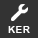
<style>
.page{position:relative;width:38px;height:38px;background:#333333}
.page>*{position:absolute;margin:0}
.t1{font:10px "Arial-BoldMT";letter-spacing:0.05em;color:#ffffff}
</style>
<div class="page">
<p class="t1" style="left:8px;top:26px;width:22px;height:7px">KER</p>
</div>
